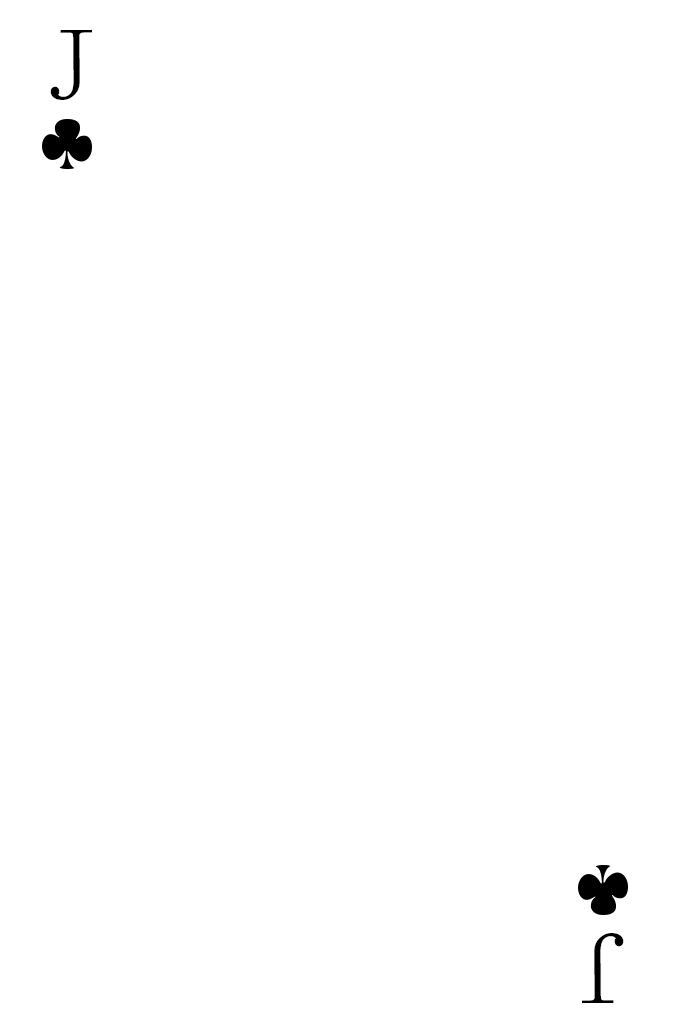
<style>
.page{position:relative;width:673px;height:1028px;background:#ffffff}
.page>*{position:absolute;margin:0}
.t1{font:104.2px "SimSun-ExtB";color:#010101;scale:0.93 1}
</style>
<div class="page">
<p class="t1" style="left:50px;top:29px;width:42px;height:71px">J</p>
<p class="t1" style="left:582px;top:933px;width:42px;height:71px;rotate:180deg">J</p>
</div>
